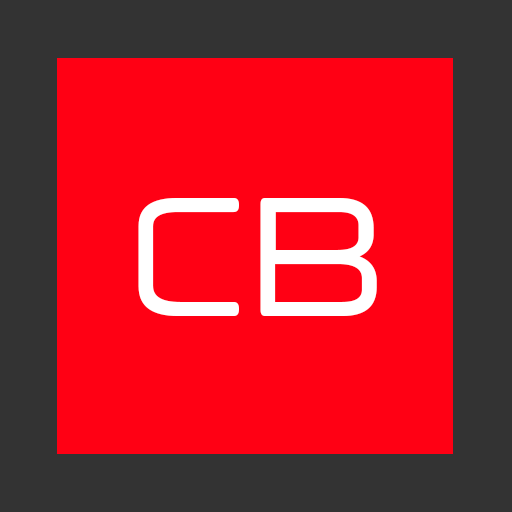
<style>
.page{position:relative;width:512px;height:512px;background:#ff0014}
.page>*{position:absolute;margin:0}
.t1{font:169px "NeuropolXFree";color:#ffffff;scale:0.83 1}
</style>
<div class="page">
<p class="t1" style="left:138px;top:198px;width:239px;height:118px">CB</p>
</div>
